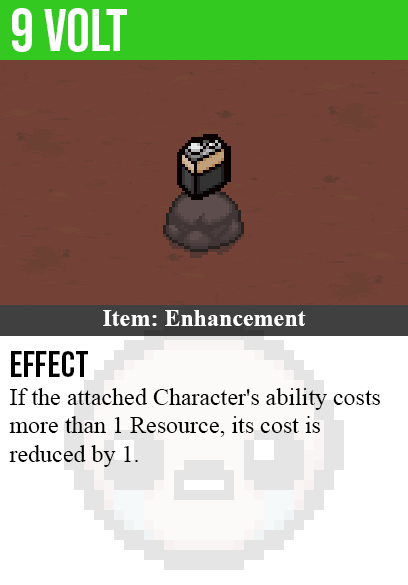
<style>
.page{position:relative;width:408px;height:585px;background:#734136}
.page>*{position:absolute;margin:0}
.t1{font:60px "BebasNeue-Regular";color:#ffffff}
.t2{font:24px "TimesNewRomanPS-BoldMT";color:#ffffff}
.t3{font:36px "BebasNeue-Regular";color:#000000}
.t4{font:24px "TimesNewRomanPSMT";color:#000000}
</style>
<div class="page">
<p class="t1" style="left:12px;top:8px;width:115px;height:44px">9 volt</p>
<p class="t2" style="left:103px;top:310px;width:203px;height:16px">Item: Enhancement</p>
<p class="t3" style="left:11px;top:351px;width:77px;height:26px">effect</p>
<p class="t4" style="left:9px;top:388px;width:371px;height:79px">If the attached Character's ability costs<br>more than 1 Resource, its cost is<br>reduced by 1.</p>
</div>
